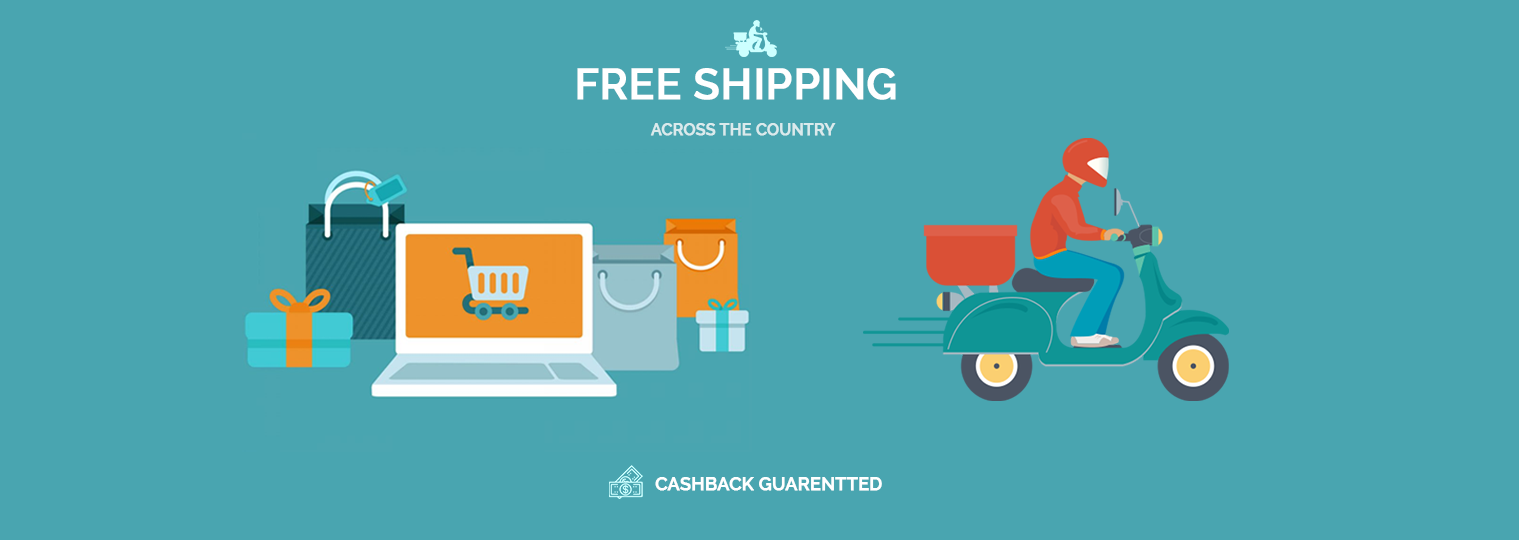
<style>
.page{position:relative;width:1519px;height:540px;background:#49a5b0}
.page>*{position:absolute;margin:0}
.t1{font:43.3px "Raleway-SemiBold";color:#ffffff;font-weight:bold}
.t2{font:17.4px "Raleway-SemiBold";color:#daeaec;font-weight:bold;scale:0.9 1}
.t3{font:18.2px "Raleway-SemiBold";color:#ffffff;font-weight:bold}
</style>
<div class="page">
<p class="t1" style="left:577px;top:68px;width:319px;height:32px">FREE SHIPPING</p>
<p class="t2" style="left:650px;top:123px;width:186px;height:13px">ACROSS THE COUNTRY</p>
<p class="t3" style="left:655px;top:477px;width:227px;height:14px">CASHBACK GUARENTTED</p>
</div>
